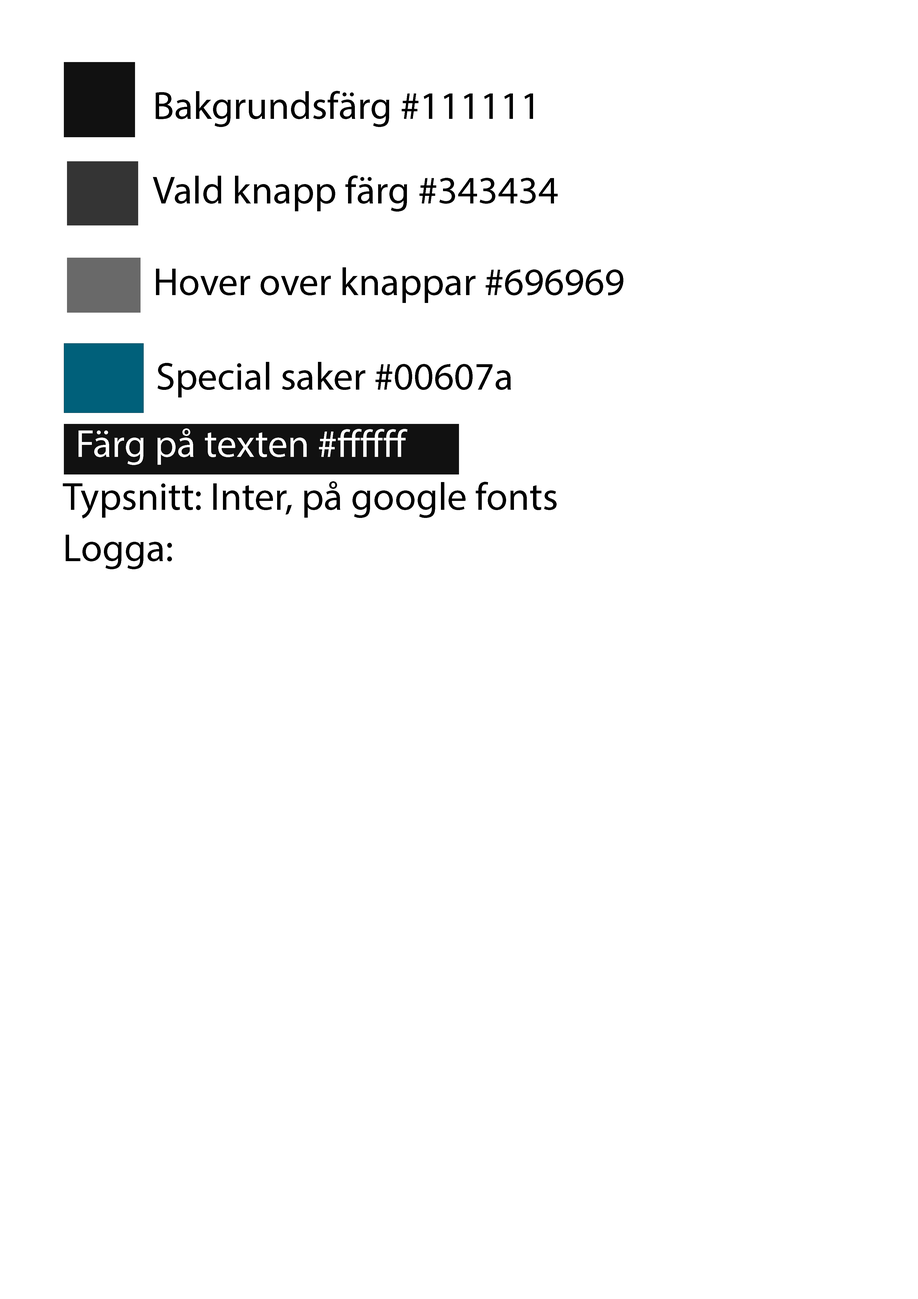
<style>
.page{position:relative;width:918px;height:1299px;background:#ffffff}
.page>*{position:absolute;margin:0}
.t1{font:39.3px "MyriadPro-Regular";color:#000000}
.t2{font:39.3px "MyriadPro-Regular";color:#ffffff}
</style>
<div class="page">
<p class="t1" style="left:156px;top:91px;width:377px;height:36px">Bakgrundsfärg #111111</p>
<p class="t1" style="left:153px;top:175px;width:405px;height:37px">Vald knapp färg #343434</p>
<p class="t1" style="left:156px;top:267px;width:468px;height:36px">Hover over knappar #696969</p>
<p class="t1" style="left:158px;top:362px;width:353px;height:35px">Special saker #00607a</p>
<p class="t2" style="left:79px;top:428px;width:329px;height:37px">Färg på texten #ffffff</p>
<p class="t1" style="left:63px;top:481px;width:494px;height:37px">Typsnitt: Inter, på google fonts</p>
</div>
